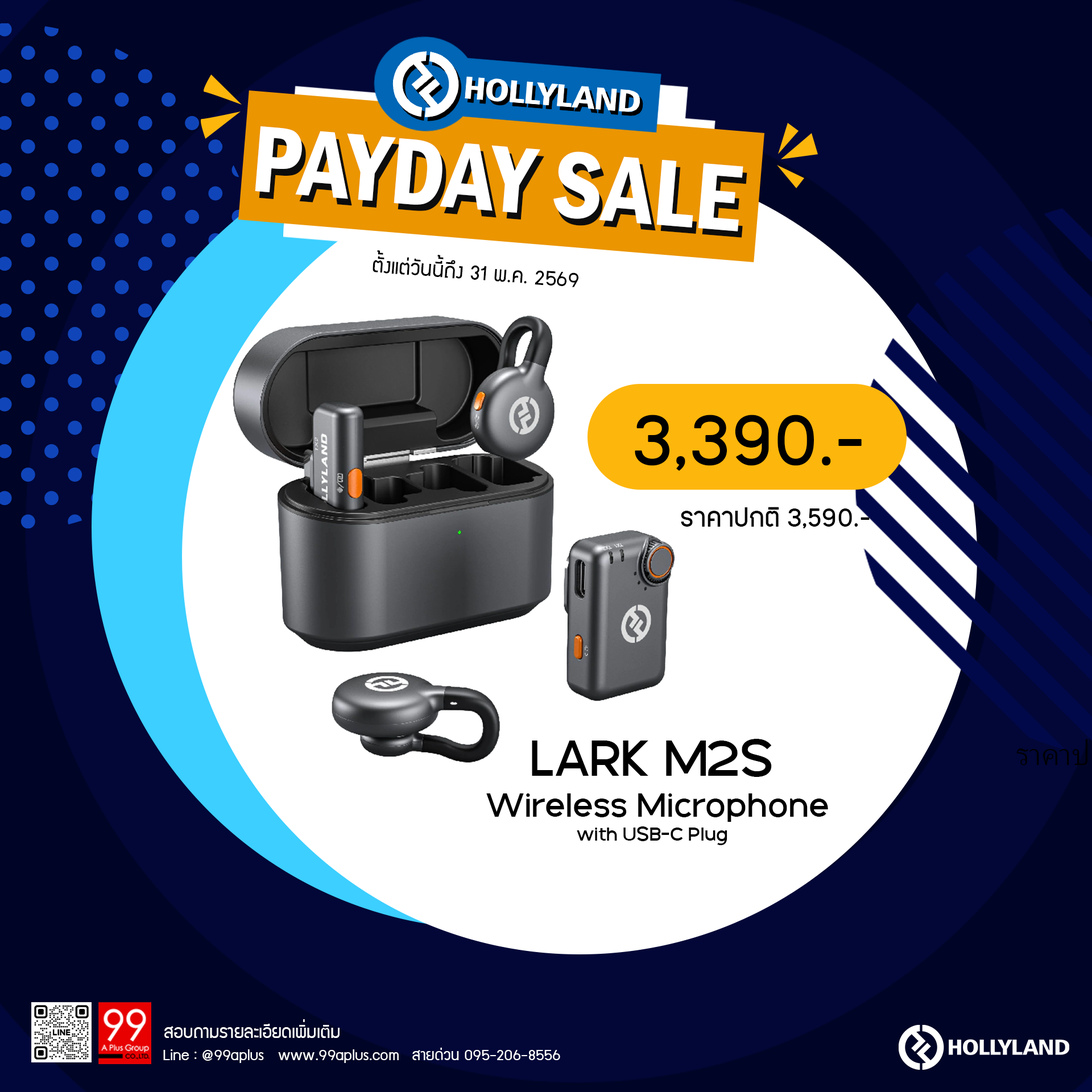
<style>
.page{position:relative;width:1092px;height:1092px;background:#ffffff}
.page>*{position:absolute;margin:0}
.t1{font:97.5px "FranklinGothic-DemiCond";color:#ffffff}
.t2{font:97.5px "FranklinGothic-DemiCond"}
.t3{font:23.2px "supermarket";color:#000000}
.t4{font:83.5px "PK-NakhonPathom-Demo";color:#000000}
.t5{font:30.3px "PK-NakhonPathom-Demo";color:#000000}
.t6{font:54px "GalakPro-Demo";color:#000000}
.t7{font:35.6px "GalakPro-Demo";color:#000000}
.t8{font:20.4px "GalakPro-Demo";color:#000000}
.t9{font:19.8px "supermarket";color:#ffffff}
.t10{font:17.2px "supermarket";color:#ffffff}
</style>
<div class="page">
<p class="t1" style="left:255px;top:126px;width:488px;height:105px;rotate:5deg">PAYDAY SALE</p>
<p class="t2" style="left:259px;top:133px;width:488px;height:105px;rotate:5deg">PAYDAY SALE</p>
<p class="t3" style="left:373px;top:250px;width:205px;height:37px;rotate:4deg">ตั้งแต่วันนี้ถึง 31 พ.ค. 2569</p>
<p class="t4" style="left:635px;top:415px;width:227px;height:56px">3,390.-</p>
<p class="t5" style="left:681px;top:507px;width:189px;height:21px">ราคาปกติ 3,590.-</p>
<p class="t6" style="left:532px;top:739px;width:240px;height:38px">LARK M2S</p>
<p class="t7" style="left:486px;top:793px;width:342px;height:29px">Wireless Microphone</p>
<p class="t8" style="left:577px;top:826px;width:150px;height:19px">with USB-C Plug</p>
<p class="t9" style="left:164px;top:1019px;width:176px;height:19px">สอบถามรายละเอียดเพิ่มเติม</p>
<p class="t10" style="left:163px;top:1049px;width:236px;height:14px">Line : @99aplus   www.99aplus.com</p>
<p class="t10" style="left:412px;top:1048px;width:148px;height:12px">สายด่วน 095-206-8556</p>
</div>
